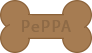
<style>
.page{position:relative;width:92px;height:53px;background:#a67c52}
.page>*{position:absolute;margin:0}
.t1{font:16.7px "MyriadPro-Regular";letter-spacing:0.1em;color:#8e6a46}
</style>
<div class="page">
<p class="t1" style="left:22px;top:20px;width:49px;height:12px">PePPA</p>
</div>
